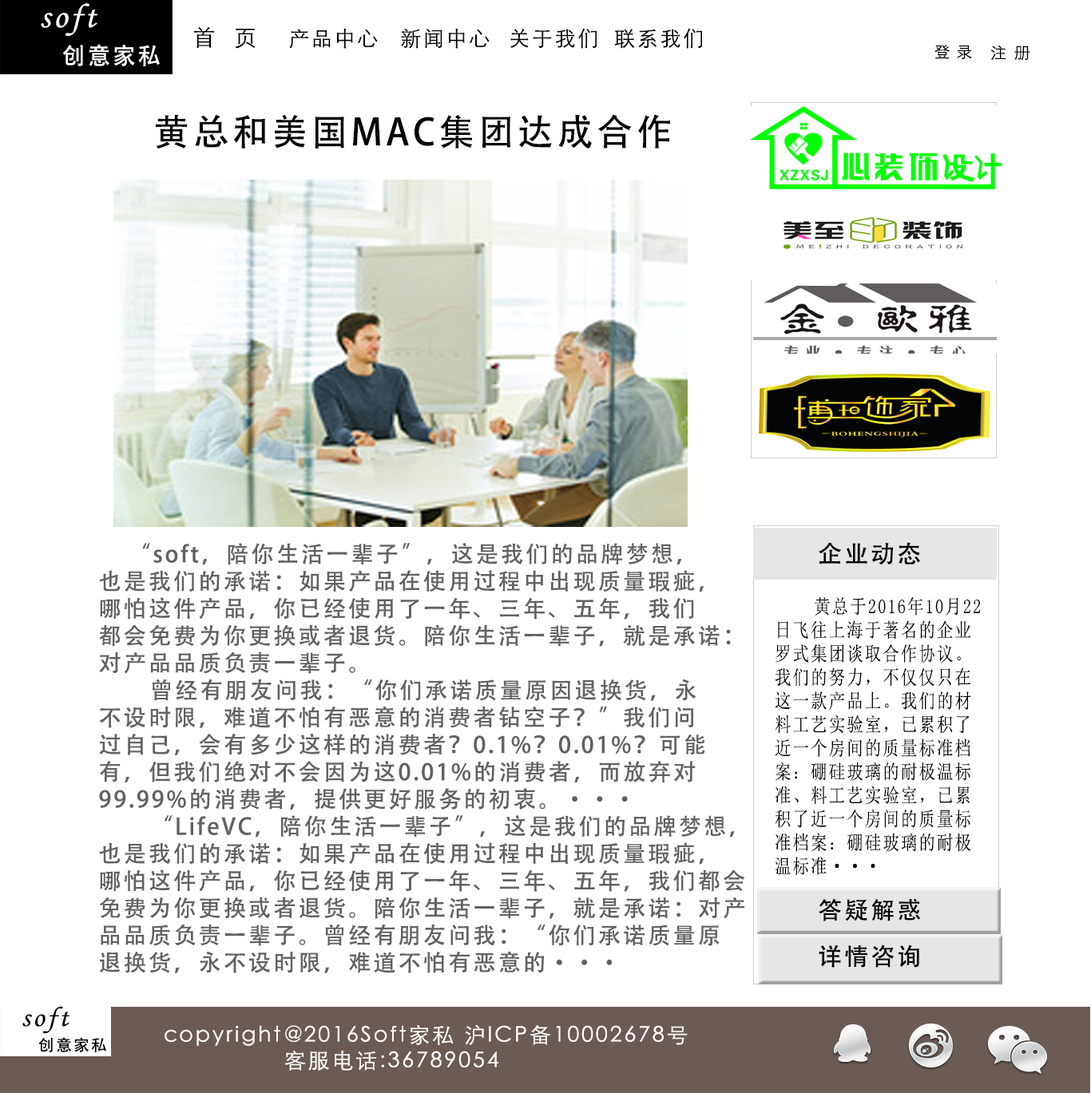
<style>
.page{position:relative;width:1091px;height:1093px;background:#ffffff}
.page>*{position:absolute;margin:0}
.t1{font:34.1px "MonotypeCorsiva";letter-spacing:0.1em;color:#ffffff}
.t2{font:22.4px "STXihei";letter-spacing:0.1em;color:#000000}
.t3{font:20.9px "STXihei";letter-spacing:0.1em;color:#000000}
.t4{font:23.3px "AdobeHeitiStd-Regular";letter-spacing:0.1em;color:#ffffff}
.t5{font:15.9px "STXihei";letter-spacing:0.1em;color:#000000;scale:0.97 1}
.t6{font:15.9px "STXihei";letter-spacing:0.1em;color:#000000}
.t7{font:36.4px "AdobeHeitiStd-Regular";letter-spacing:0.1em;color:#040404}
.t8{font:22.7px "AdobeHeitiStd-Regular";letter-spacing:0.1em;color:#636161}
.t9{font:22.7px "AdobeHeitiStd-Regular";letter-spacing:0.1em;color:#040404}
.t10{font:24px "AdobeHeitiStd-Regular";letter-spacing:0.1em;color:#040404}
.t11{font:19.7px "SimSun";letter-spacing:0.1em;color:#040404;scale:0.83 1}
.t12{font:28.3px "MonotypeCorsiva";letter-spacing:0.1em;color:#000000}
.t13{font:21.3px "STXihei";letter-spacing:0.1em;color:#ffffff}
.t14{font:15.8px "AdobeHeitiStd-Regular";letter-spacing:0.1em;color:#000000}
</style>
<div class="page">
<p class="t1" style="left:41px;top:3px;width:56px;height:33px">soft</p>
<p class="t2" style="left:193px;top:26px;width:63px;height:23px">首  页</p>
<p class="t3" style="left:289px;top:28px;width:89px;height:21px">产品中心</p>
<p class="t3" style="left:401px;top:28px;width:88px;height:21px">新闻中心</p>
<p class="t3" style="left:510px;top:28px;width:87px;height:21px">关于我们</p>
<p class="t3" style="left:614px;top:28px;width:88px;height:21px">联系我们</p>
<p class="t4" style="left:63px;top:44px;width:97px;height:22px">创意家私</p>
<p class="t5" style="left:934px;top:45px;width:38px;height:15px">登 录</p>
<p class="t6" style="left:990px;top:45px;width:40px;height:15px">注 册</p>
<p class="t7" style="left:156px;top:114px;width:514px;height:35px">黄总和美国MAC集团达成合作</p>
<p class="t8" style="left:99px;top:543px;width:646px;height:430px"><span class="t9">    </span>“soft，陪你生活一辈子”，这是我们的品牌梦想，<br>也是我们的承诺：如果产品在使用过程中出现质量瑕疵，<br>哪怕这件产品，你已经使用了一年、三年、五年，我们<br>都会免费为你更换或者退货。陪你生活一辈子，就是承诺：<br>对产品品质负责一辈子。<br>       曾经有朋友问我：“你们承诺质量原因退换货，永<br>不设时限，难道不怕有恶意的消费者钻空子？”我们问<br>过自己，会有多少这样的消费者？0.1%？0.01%？可能<br>有，但我们绝对不会因为这0.01%的消费者，而放弃对<br>99.99%的消费者，提供更好服务的初衷。···<br>       “LifeVC，陪你生活一辈子”，这是我们的品牌梦想，<br>也是我们的承诺：如果产品在使用过程中出现质量瑕疵，<br>哪怕这件产品，你已经使用了一年、三年、五年，我们都会<br>免费为你更换或者退货。陪你生活一辈子，就是承诺：对产<br>品品质负责一辈子。曾经有朋友问我：“你们承诺质量原<br>退换货，永不设时限，难道不怕有恶意的···</p>
<p class="t10" style="left:818px;top:542px;width:102px;height:23px">企业动态</p>
<p class="t11" style="left:775px;top:597px;width:206px;height:278px">黄总于2016年10月22<br>日飞往上海于著名的企业<br>罗式集团谈取合作协议。<br>我们的努力，不仅仅只在<br>这一款产品上。我们的材<br>料工艺实验室，已累积了<br>近一个房间的质量标准档<br>案：硼硅玻璃的耐极温标<br>准、料工艺实验室，已累<br>积了近一个房间的质量标<br>准档案：硼硅玻璃的耐极<br>温标准···</p>
<p class="t10" style="left:818px;top:898px;width:103px;height:24px">答疑解惑</p>
<p class="t10" style="left:818px;top:945px;width:101px;height:23px">详情咨询</p>
<p class="t12" style="left:22px;top:1006px;width:47px;height:28px">soft</p>
<p class="t13" style="left:164px;top:1025px;width:524px;height:46px">copyright@2016Soft家私 沪ICP备10002678号<br>                客服电话:36789054</p>
<p class="t14" style="left:38px;top:1037px;width:68px;height:15px">创意家私</p>
</div>
